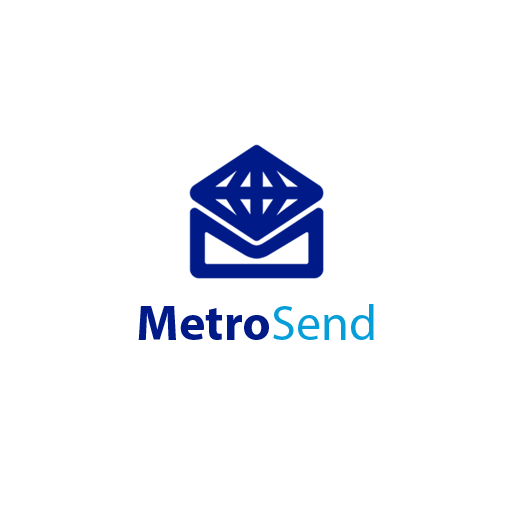
<style>
.page{position:relative;width:512px;height:512px;background:#ffffff}
.page>*{position:absolute;margin:0}
.t1{font:50px "MyriadPro-Bold";color:#001a88}
.t2{font:50px "MyriadPro-Regular";color:#059ed8}
</style>
<div class="page">
<p class="t1" style="left:138px;top:304px;width:236px;height:36px">Metro<span class="t2">Send</span></p>
</div>
